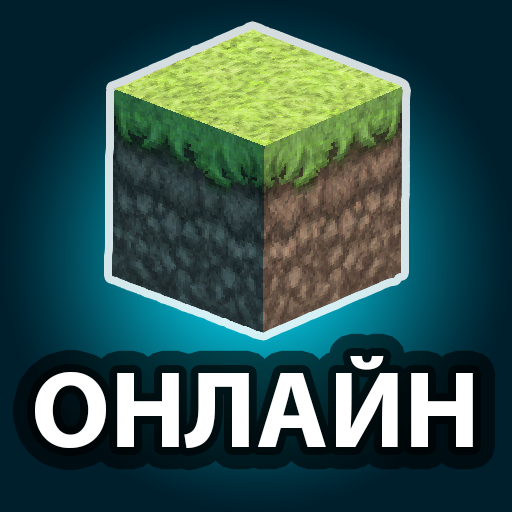
<style>
.page{position:relative;width:512px;height:512px}
.page>*{position:absolute;margin:0}
.t1{font:110px "MyriadPro-Bold";color:#ffffff}
</style>
<div class="page">
<p class="t1" style="left:35px;top:356px;width:438px;height:92px">ОНЛАЙН</p>
</div>
